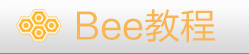
<style>
.page{position:relative;width:249px;height:54px}
.page>*{position:absolute;margin:0}
.t1{font:36px "FZLTHJW--GB1-0";color:#f8b551}
.t2{font:30px "FZLTHJW--GB1-0";color:#898989}
</style>
<div class="page">
<p class="t1" style="left:77px;top:9px;width:138px;height:34px">Bee教程<span class="t2">work</span></p>
</div>
